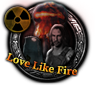
<style>
.page{position:relative;width:95px;height:85px}
.page>*{position:absolute;margin:0}
.t1{font:10.8px "SourceSerifRoman-Semibold"}
</style>
<div class="page">
<p class="t1" style="left:6px;top:52px;width:72px;height:23px;rotate:5deg">Love Like Fire</p>
</div>
